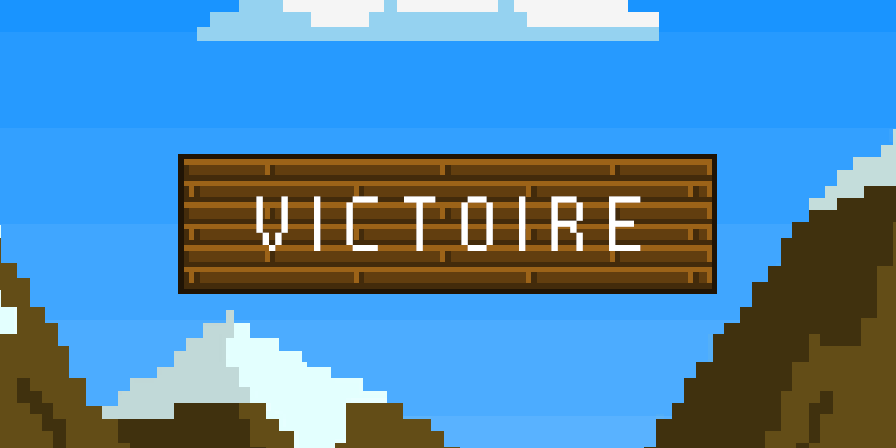
<style>
.page{position:relative;width:896px;height:448px}
.page>*{position:absolute;margin:0}
.t1{font:97px "Nine-By-Five-NBP";letter-spacing:0.2em;color:#ffffff;scale:1.03 1}
</style>
<div class="page">
<p class="t1" style="left:256px;top:196px;width:385px;height:55px">VICTOIRE</p>
</div>
